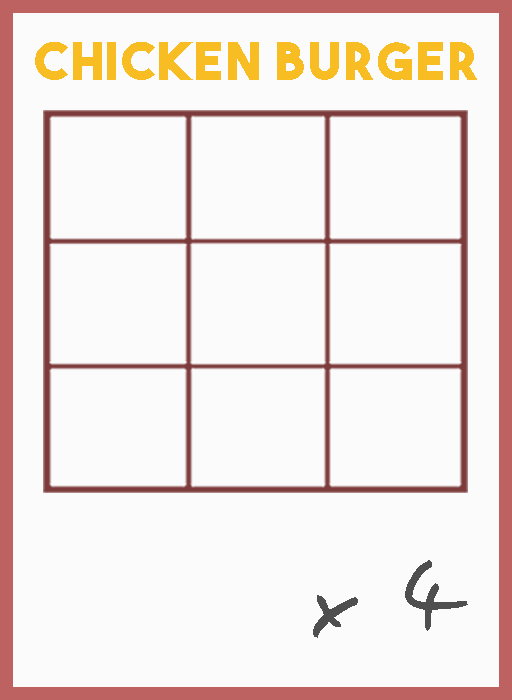
<style>
.page{position:relative;width:512px;height:700px;background:#fbfbfb}
.page>*{position:absolute;margin:0}
.t1{font:52.1px "TheBoldFont";letter-spacing:0.05em;color:#f7bd22}
.t2{font:106.1px "EasySpeech";letter-spacing:0.05em;color:#4f4f4f}
</style>
<div class="page">
<p class="t1" style="left:35px;top:42px;width:442px;height:38px">Chicken burger</p>
<p class="t2" style="left:313px;top:560px;width:155px;height:78px">x 4</p>
</div>
